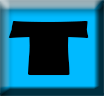
<style>
.page{position:relative;width:104px;height:96px;background:#000000}
.page>*{position:absolute;margin:0}
.t1{font:78px "BerlinSansFB-Bold";color:#000000;scale:1.92 1}
</style>
<div class="page">
<p class="t1" style="left:8px;top:21px;width:81px;height:55px">T</p>
</div>
